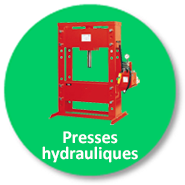
<style>
.page{position:relative;width:185px;height:185px;background:#00cc66}
.page>*{position:absolute;margin:0}
.t1{font:18px/16px "Calibri-Bold";color:#ffffff}
</style>
<div class="page">
<p class="t1" style="left:42px;top:131px;width:96px;height:32px;text-align:center">Presses<br>hydrauliques</p>
</div>
